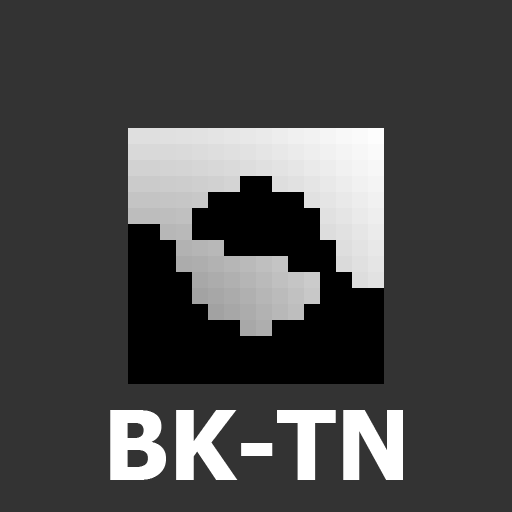
<style>
.page{position:relative;width:512px;height:512px;background:#333333}
.page>*{position:absolute;margin:0}
.t1{font:96px "Tahoma-Bold";color:#ffffff}
</style>
<div class="page">
<p class="t1" style="left:110px;top:410px;width:293px;height:70px">BK-TN</p>
</div>
